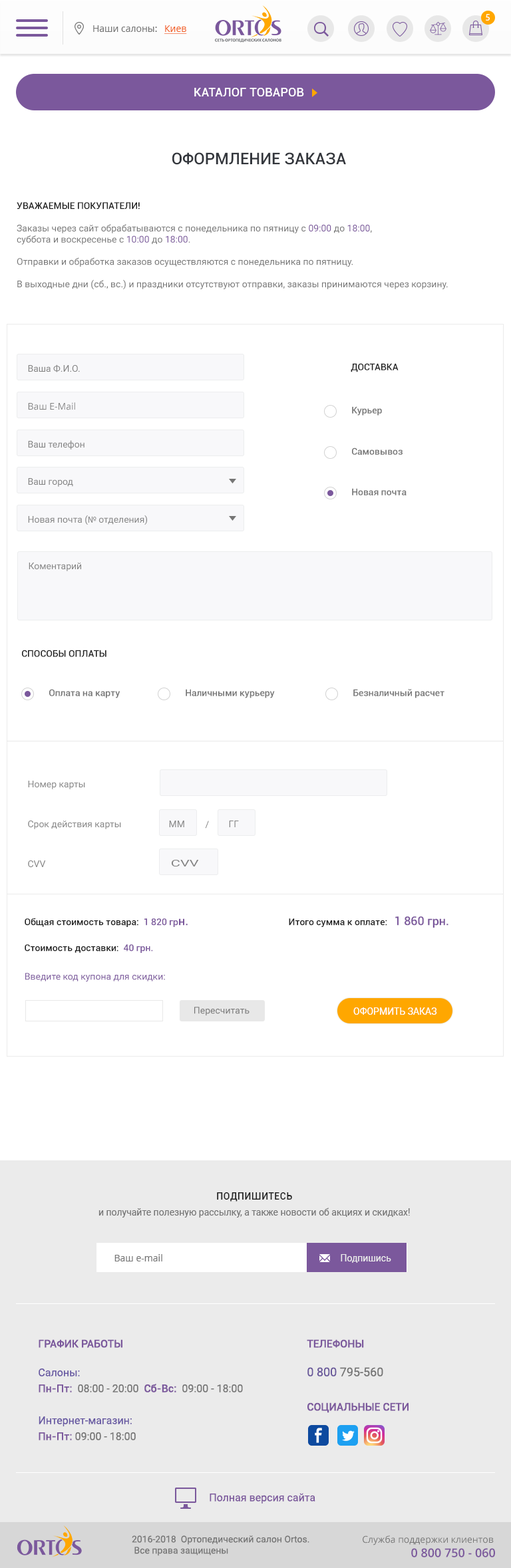
<style>
.page{position:relative;width:511px;height:1568px;background:#ffffff}
.page>*{position:absolute;margin:0}
.t1{font:9.3px "MyriadPro-Regular";letter-spacing:0.1em;color:#ffffff;text-transform:uppercase}
.t2{font:9.3px "OpenSans";color:#757575}
.t3{font:9.3px "OpenSans";color:#f26022;text-decoration:underline}
.t4{font:12px "Roboto-Medium";letter-spacing:0.01em;color:#ffffff;text-transform:uppercase}
.t5{font:16px "Roboto-Medium";color:#34373d;text-transform:uppercase}
.t6{font:9.3px "Roboto-Regular";color:#757575}
.t7{font:9.3px "Roboto-Medium";color:#212121;text-transform:uppercase}
.t8{font:9.3px "Roboto-Regular";color:#7b589c}
.t9{font:9.3px "Roboto-Regular";letter-spacing:-0.002em;color:#838383}
.t10{font:9.3px "Roboto-Medium";letter-spacing:-0.002em;color:#212121;text-transform:uppercase}
.t11{font:9.3px "OpenSans";letter-spacing:-0.002em;color:#838383}
.t12{font:9.3px "Roboto-Medium";letter-spacing:-0.002em;color:#757575}
.t13{font:9.3px "MyriadPro-Regular";letter-spacing:-0.002em;color:#838383}
.t14{font:9.3px "Roboto-Regular";letter-spacing:-0.002em;color:#838383;text-transform:uppercase}
.t15{font:9.3px "Roboto-Regular";letter-spacing:-0.002em;color:#838383;scale:1.56 1}
.t16{font:9.3px "Roboto-Medium";letter-spacing:-0.002em;color:#212121}
.t17{font:9.3px "Roboto-Medium";letter-spacing:-0.002em;color:#7b589c;text-transform:uppercase}
.t18{font:9.3px "Roboto-Medium";letter-spacing:-0.002em;color:#7b589c}
.t19{font:12px "Roboto-Medium";letter-spacing:-0.002em;color:#7b589c}
.t20{font:12px "Roboto-Medium";letter-spacing:-0.002em;color:#7b589c;text-transform:uppercase}
.t21{font:9.3px "Roboto-Regular";color:#ffffff;text-transform:uppercase}
.t22{font:9.3px/16px "Roboto-Regular";color:#757575}
.t23{font:9.3px "Roboto-Medium";letter-spacing:0.05em;color:#212121;text-transform:uppercase}
.t24{font:9.3px "Roboto-Regular";color:#ebebeb}
.t25{font:10.6px/16px "Roboto-Regular";color:#6758a2}
.t26{font:10.6px "Roboto-Medium";color:#7b589c;text-transform:uppercase}
.t27{font:10.6px/16px "Roboto-Medium";color:#7b589c}
.t28{font:10.6px/16px "Roboto-Regular";color:#757575}
.t29{font:12px/16px "Roboto-Regular";color:#68579a}
.t30{font:12px/16px "Roboto-Regular";color:#757575}
.t31{font:10.6px "Roboto-Regular";color:#7b589c}
.t32{font:12px "OpenSans-Semibold";color:#7b589c}
</style>
<div class="page">
<p class="t1" style="left:485px;top:14px;width:4px;height:7px">5</p>
<p class="t2" style="left:93px;top:25px;width:94px;height:9px">Наши салоны: <span class="t3">Киев</span></p>
<p class="t4" style="left:194px;top:88px;width:110px;height:8px">Каталог товаров</p>
<p class="t5" style="left:172px;top:152px;width:174px;height:13px">Оформление заказа</p>
<p class="t6" style="left:17px;top:202px;width:431px;height:88px"><span class="t7">Уважаемые покупатели!<br><br></span>Заказы через сайт обрабатываются с понедельника по пятницу с <span class="t8">09:00</span> до <span class="t8">18:00</span>, <br>суббота и воскресенье с <span class="t8">10:00</span> до <span class="t8">18:00</span>.<br><br>Отправки и обработка заказов осуществляются с понедельника по пятницу.<br><br>В выходные дни (сб., вс.) и праздники отсутствуют отправки, заказы принимаются через корзину.</p>
<p class="t9" style="left:28px;top:364px;width:52px;height:8px">Ваша Ф.И.О.</p>
<p class="t10" style="left:350px;top:363px;width:48px;height:9px">Доставка</p>
<p class="t11" style="left:28px;top:402px;width:47px;height:8px">Ваш E-Mail</p>
<p class="t12" style="left:352px;top:406px;width:30px;height:10px">Курьер</p>
<p class="t9" style="left:28px;top:440px;width:56px;height:10px">Ваш телефон</p>
<p class="t12" style="left:352px;top:448px;width:50px;height:7px">Самовывоз</p>
<p class="t9" style="left:28px;top:478px;width:45px;height:9px">Ваш город</p>
<p class="t12" style="left:352px;top:488px;width:54px;height:7px">Новая почта</p>
<p class="t9" style="left:28px;top:515px;width:120px;height:10px">Новая почта (<span class="t13">№</span> отделения)</p>
<p class="t9" style="left:29px;top:563px;width:52px;height:8px">Коментарий</p>
<p class="t10" style="left:22px;top:650px;width:84px;height:7px">Способы оплаты</p>
<p class="t12" style="left:49px;top:689px;width:71px;height:9px">Оплата на карту</p>
<p class="t12" style="left:186px;top:689px;width:89px;height:9px">Наличными курьеру</p>
<p class="t12" style="left:353px;top:689px;width:91px;height:9px">Безналичный расчет</p>
<p class="t9" style="left:28px;top:781px;width:57px;height:8px">Номер карты</p>
<p class="t9" style="left:28px;top:820px;width:93px;height:9px">Срок действия карты</p>
<p class="t14" style="left:169px;top:821px;width:15px;height:6px">мм</p>
<p class="t9" style="left:205px;top:821px;width:4px;height:8px">/</p>
<p class="t14" style="left:229px;top:821px;width:10px;height:6px">гг</p>
<p class="t9" style="left:28px;top:860px;width:18px;height:8px">CVV</p>
<p class="t15" style="left:172px;top:859px;width:27px;height:8px">CVV</p>
<p class="t16" style="left:25px;top:918px;width:163px;height:9px">Общая стоимость товара<span class="t10">:  </span><span class="t17">1 820 </span><span class="t18">гр</span><span class="t19">н.</span></p>
<p class="t16" style="left:289px;top:916px;width:159px;height:12px">Итого сумма к оплате:   <span class="t20">1 860 </span><span class="t19">грн.</span></p>
<p class="t16" style="left:25px;top:944px;width:128px;height:9px">Стоимость доставки<span class="t10">:  </span><span class="t17">40 </span><span class="t18">грн.</span></p>
<p class="t8" style="left:25px;top:973px;width:140px;height:9px">Введите код купона для скидки:</p>
<p class="t6" style="left:194px;top:1007px;width:55px;height:8px">Пересчитать</p>
<p class="t21" style="left:353px;top:1007px;width:84px;height:8px">Оформить заказ</p>
<p class="t22" style="left:98px;top:1192px;width:312px;height:26px;text-align:center"><span class="t23">Подпишитесь <br></span>и получайте полезную рассылку, а также новости об акциях и скидках!</p>
<p class="t2" style="left:114px;top:1254px;width:48px;height:7px">Ваш e-mail</p>
<p class="t24" style="left:340px;top:1254px;width:51px;height:9px">Подпишись</p>
<p class="t25" style="left:39px;top:1339px;width:204px;height:101px"><span class="t26">График работы<br><br></span>Салоны: <br><span class="t27">Пн-Пт:</span><span class="t28">  08:00 - 20:00  </span><span class="t27">Сб-Вс:</span><span class="t28">  09:00 - 18:00<br><br></span>Интернет-магазин:<br><span class="t27">Пн-Пт:</span><span class="t28"> 09:00 - 18:00</span></p>
<p class="t26" style="left:307px;top:1339px;width:76px;height:37px">Телефоны<br><br><span class="t29">0 800 </span><span class="t30">795-560</span></p>
<p class="t26" style="left:307px;top:1402px;width:101px;height:11px">Социальные сети</p>
<p class="t31" style="left:209px;top:1493px;width:106px;height:10px">Полная версия сайта</p>
<p class="t6" style="left:132px;top:1535px;width:177px;height:21px">2016-2018  Ортопедический салон Ortos.<br> Все права защищены</p>
<p class="t2" style="left:362px;top:1535px;width:133px;height:22px;text-align:right">Служба поддержки клиентов <br> <span class="t32">0 800 750 - 060</span></p>
</div>
